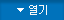
<style>
.page{position:relative;width:64px;height:20px;background:#0072bb}
.page>*{position:absolute;margin:0}
.t1{font:11px "Dotum";letter-spacing:-0.1em;color:#f6f6f6}
</style>
<div class="page">
<p class="t1" style="left:29px;top:5px;width:18px;height:10px">열기</p>
</div>
